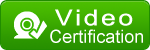
<style>
.page{position:relative;width:150px;height:50px}
.page>*{position:absolute;margin:0}
.t1{font:22px "ArialMT";letter-spacing:0.1em;color:#ffffff;scale:1.2 1}
.t2{font:18px "ArialMT";color:#ffffff}
</style>
<div class="page">
<p class="t1" style="left:55px;top:6px;width:81px;height:26px">Video</p>
<p class="t2" style="left:49px;top:27px;width:95px;height:22px">Certification</p>
</div>
